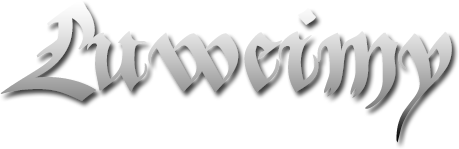
<style>
.page{position:relative;width:459px;height:149px;background:#ffffff}
.page>*{position:absolute;margin:0}
.t1{font:120px "Bastarda-K"}
</style>
<div class="page">
<p class="t1" style="left:0px;top:0px;width:452px;height:143px">Luweimy</p>
</div>
